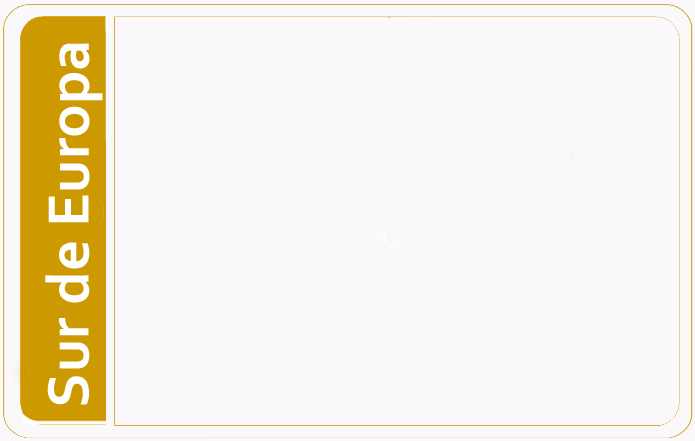
<style>
.page{position:relative;width:695px;height:441px;background:#fbf8fb}
.page>*{position:absolute;margin:0}
.t1{font:61px "Corbel-Bold";color:#ffffff}
</style>
<div class="page">
<p class="t1" style="left:45px;top:43px;width:58px;height:362px;rotate:-90deg">Sur de Europa</p>
</div>
